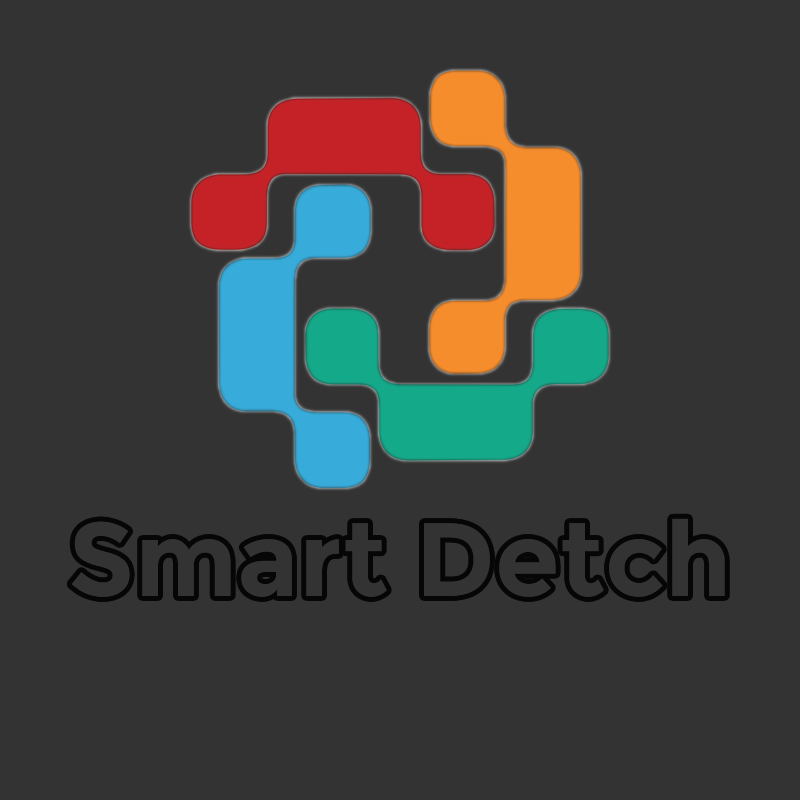
<style>
.page{position:relative;width:800px;height:800px;background:#333333}
.page>*{position:absolute;margin:0}
.t1{font:104.2px "Montserrat-Bold";color:#333333}
</style>
<div class="page">
<p class="t1" style="left:71px;top:518px;width:654px;height:79px">Smart Detch</p>
</div>
